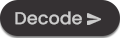
<style>
.page{position:relative;width:120px;height:38px;background:#353133}
.page>*{position:absolute;margin:0}
.t1{font:17px "Poppins-Regular";color:#cccccc;font-weight:bold}
</style>
<div class="page">
<p class="t1" style="left:15px;top:11px;width:67px;height:14px">Decode</p>
</div>
